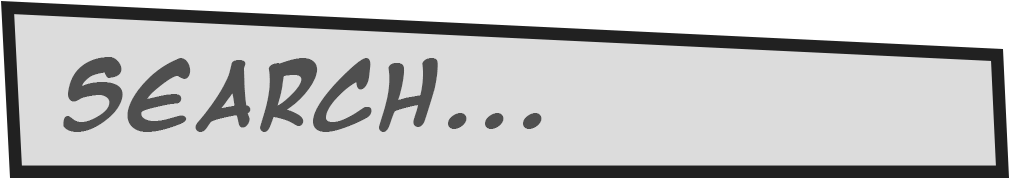
<style>
.page{position:relative;width:1010px;height:180px;background:#dcdcdc}
.page>*{position:absolute;margin:0}
.t1{font:77px "MangaTempleBold";color:#4f4f4f}
</style>
<div class="page">
<p class="t1" style="left:63px;top:57px;width:479px;height:75px">Search...</p>
</div>
